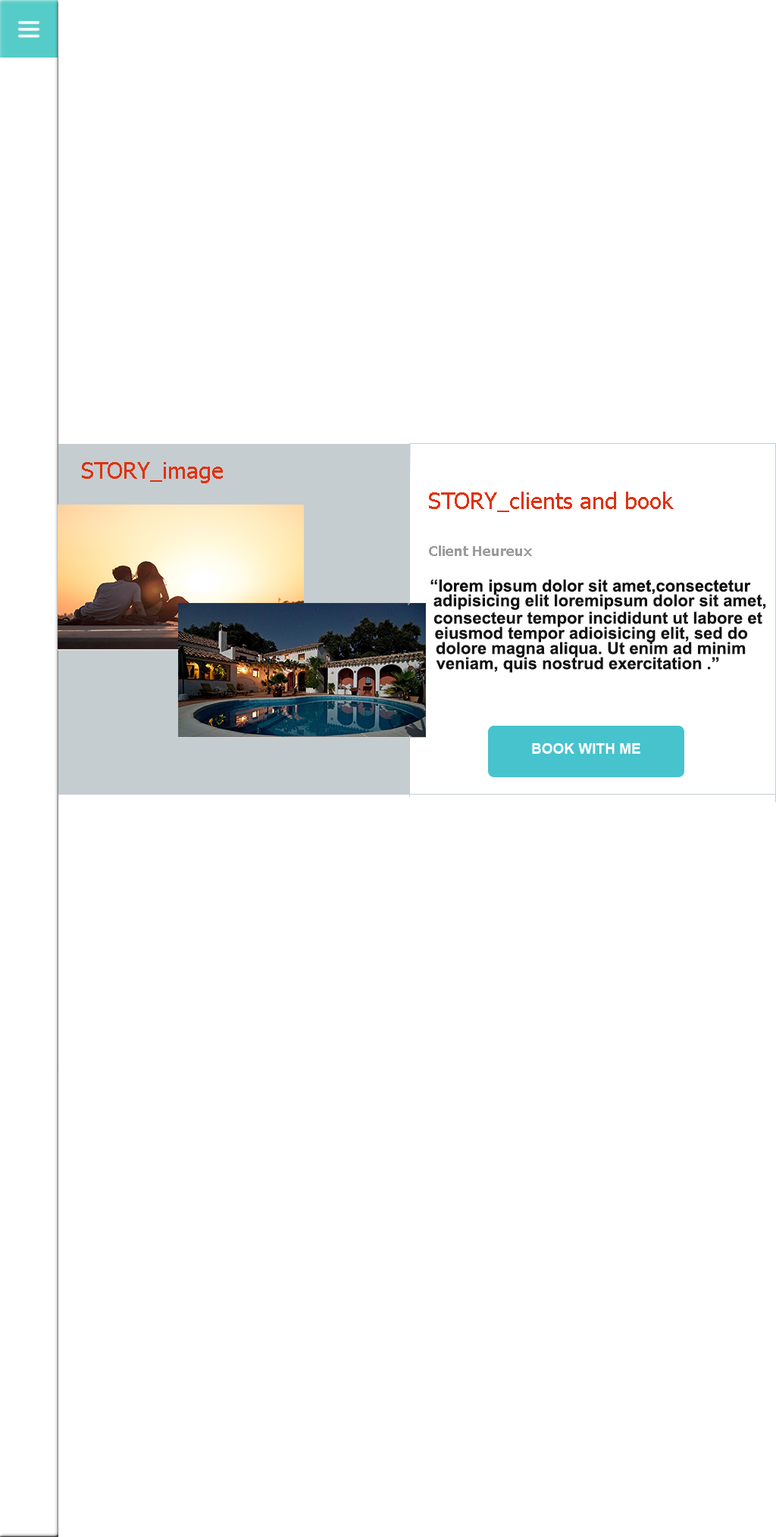
<style>
.page{position:relative;width:776px;height:1537px;background:#ffffff}
.page>*{position:absolute;margin:0}
.t1{font:22.7px "Tahoma";color:#e1310c}
.t2{font:13.6px "Tahoma-Bold";color:#9d9b9b}
.t3{font:16.7px "Arial-BoldMT";color:#0e0d0d}
.t4{font:16.7px "Arial-BoldMT";color:#0a0909}
.t5{font:16.7px "Arial-BoldMT";color:#141313}
.t6{font:14.4px "Arial-BoldMT";color:#ffffff}
</style>
<div class="page">
<p class="t1" style="left:82px;top:462px;width:141px;height:21px">STORY_image</p>
<p class="t1" style="left:429px;top:492px;width:244px;height:20px">STORY_clients and book</p>
<p class="t2" style="left:429px;top:545px;width:103px;height:11px">Client Heureux</p>
<p class="t3" style="left:430px;top:579px;width:321px;height:16px"><span class="t4">“</span>lorem ipsum dolor sit amet,consectetur</p>
<p class="t5" style="left:433px;top:594px;width:333px;height:16px">adipisicing elit loremipsum dolor sit amet,</p>
<p class="t5" style="left:433px;top:611px;width:329px;height:16px">consecteur tempor incididunt ut labore et</p>
<p class="t5" style="left:435px;top:627px;width:313px;height:15px">eiusmod tempor adioisicing elit, sed do</p>
<p class="t5" style="left:436px;top:642px;width:309px;height:16px">dolore magna aliqua. Ut enim ad minim</p>
<p class="t5" style="left:436px;top:657px;width:283px;height:16px">veniam, quis nostrud exercitation .”</p>
<p class="t6" style="left:532px;top:743px;width:108px;height:11px">BOOK WITH ME</p>
</div>
